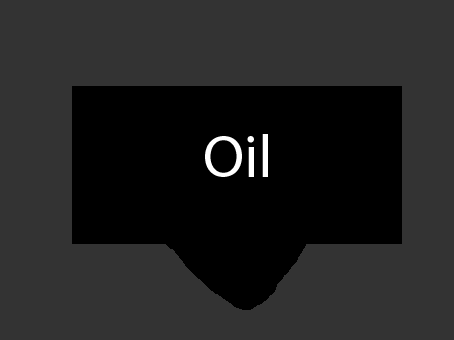
<style>
.page{position:relative;width:454px;height:340px;background:#333333}
.page>*{position:absolute;margin:0}
.t1{font:60px "MyriadPro-Regular";color:#ffffff}
</style>
<div class="page">
<p class="t1" style="left:205px;top:134px;width:63px;height:43px">Oil</p>
</div>
